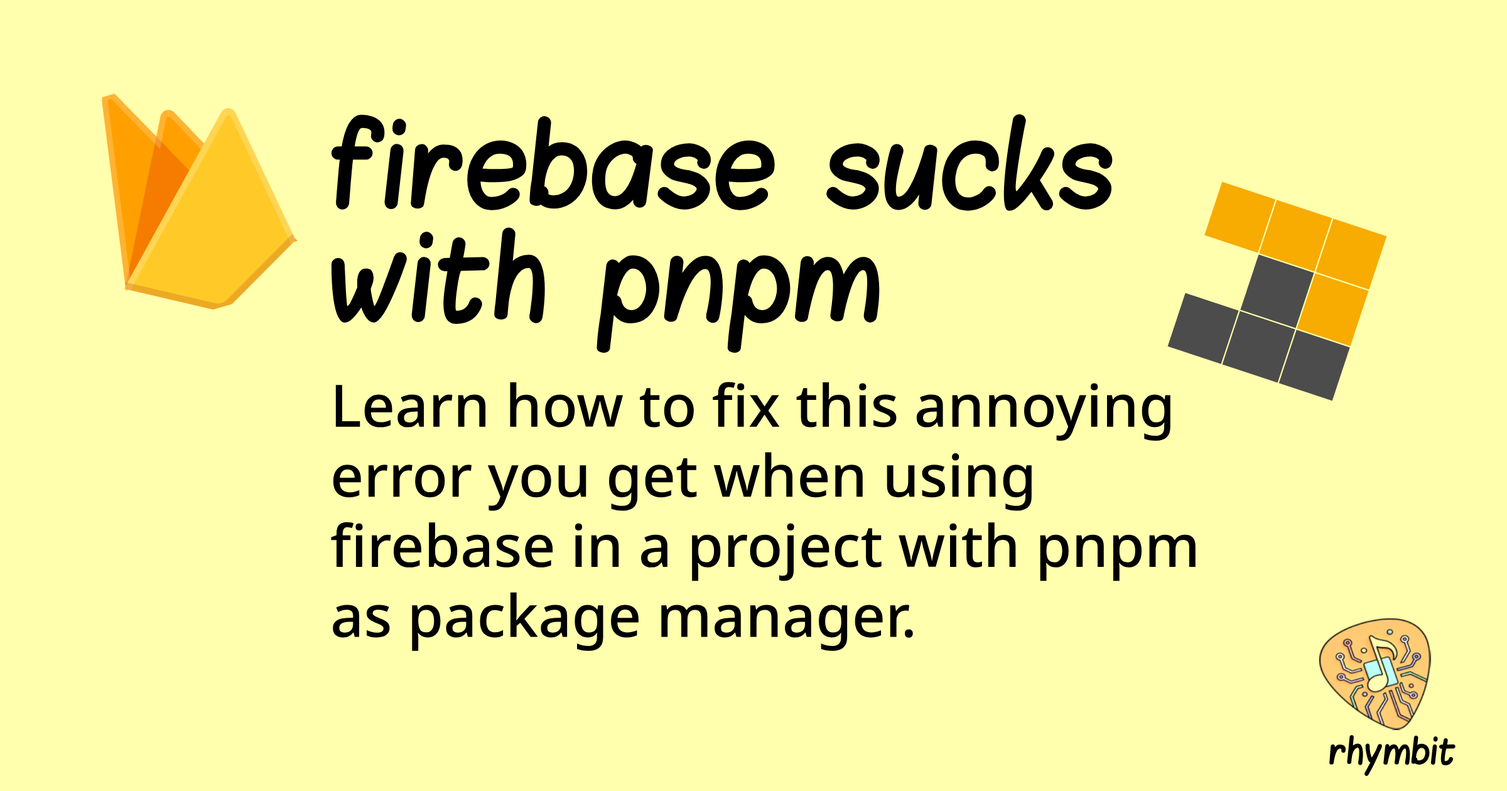
<style>
.page{position:relative;width:1507px;height:791px;background:#ffffad}
.page>*{position:absolute;margin:0}
.t1{font:94.2px "Blokletters-Viltstift";color:#000000}
.t2{font:58.4px "NotoSans-Medium";color:#000000}
.t3{font:29.5px "Blokletters-Viltstift";color:#000000}
</style>
<div class="page">
<p class="t1" style="left:331px;top:114px;width:782px;height:239px">firebase sucks with pnpm</p>
<p class="t2" style="left:331px;top:382px;width:865px;height:269px">Learn how to fix this annoying error you get when using firebase in a project with pnpm as package manager.</p>
<p class="t3" style="left:1329px;top:735px;width:127px;height:41px">rhymbit</p>
</div>
